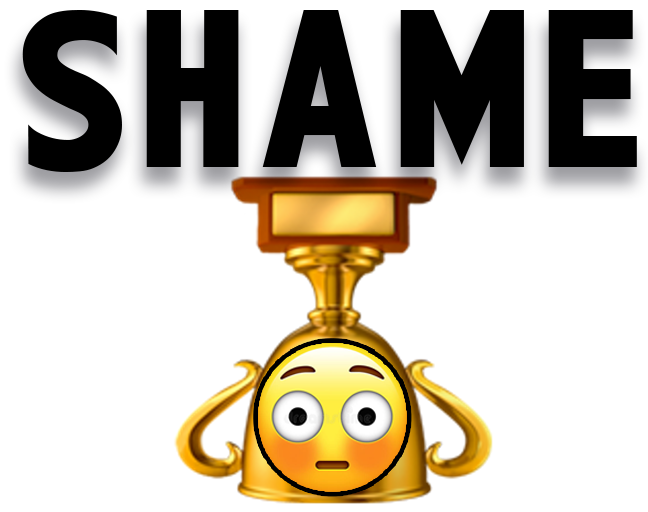
<style>
.page{position:relative;width:648px;height:512px;background:#ffffff}
.page>*{position:absolute;margin:0}
.t1{font:196.3px "WagnerZip-Change";letter-spacing:0.025em;color:#000000}
</style>
<div class="page">
<p class="t1" style="left:22px;top:10px;width:615px;height:162px">SHAME</p>
</div>
